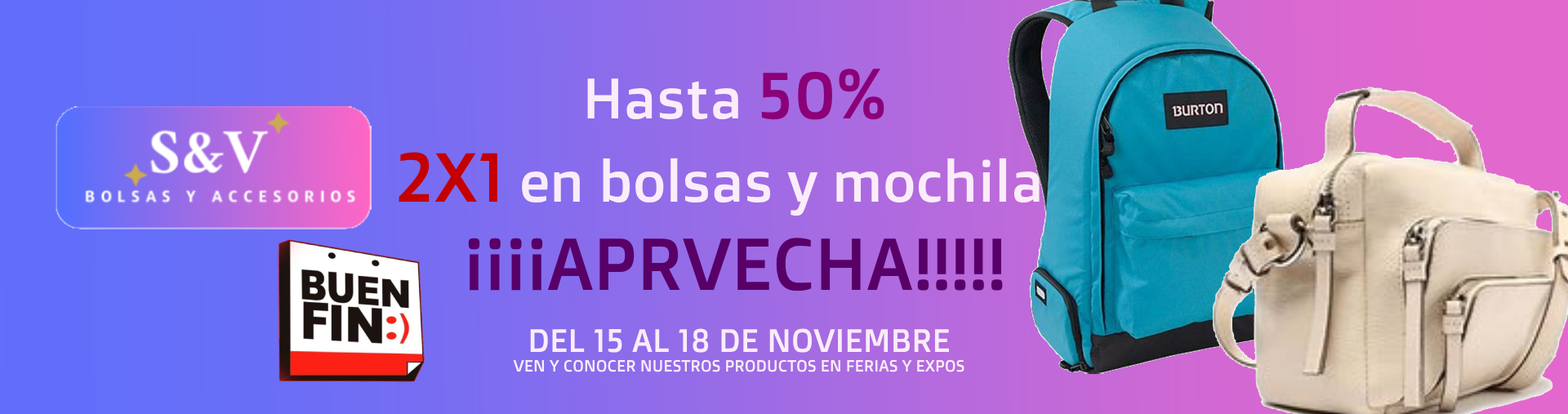
<style>
.page{position:relative;width:1568px;height:414px}
.page>*{position:absolute;margin:0}
.t1{font:57.2px "DoppioOne-Regular";color:#fbecf9}
.t2{font:65.3px "DoppioOne-Regular";color:#8b0078}
.t3{font:69.4px "DoppioOne-Regular";color:#c40000}
.t4{font:73.5px "DoppioOne-Regular";color:#580068}
.t5{font:16.3px "DoppioOne-Regular";color:#fbecf9}
.t6{font:32.7px "DoppioOne-Regular";color:#fbecf9}
</style>
<div class="page">
<p class="t1" style="left:399px;top:69px;width:672px;height:223px;text-align:center">Hasta <span class="t2">50%<br></span><span class="t3">2X1 </span>en bolsas y mochilas<br><span class="t4">¡¡¡¡APRVECHA!!!!!</span></p>
<p class="t5" style="left:513px;top:328px;width:451px;height:44px;text-align:center"><span class="t6">DEL 15 AL 18 DE NOVIEMBRE<br></span>VEN Y CONOCER NUESTROS PRODUCTOS EN FERIAS Y EXPOS</p>
</div>
